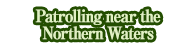
<style>
.page{position:relative;width:196px;height:49px;background:#ffffff}
.page>*{position:absolute;margin:0}
.t1{font:17px/17px "RyuminPro-ExBold";letter-spacing:-0.08em;color:#e1f1c3;font-weight:bold;scale:0.9 1}
</style>
<div class="page">
<p class="t1" style="left:35px;top:9px;width:126px;height:31px;text-align:center">Patrolling near the<br>Northern Waters</p>
</div>
